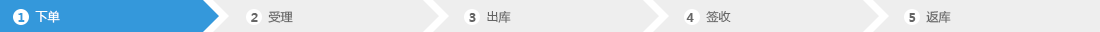
<style>
.page{position:relative;width:1100px;height:32px;background:#eeeeee}
.page>*{position:absolute;margin:0}
.t1{font:12px "MicrosoftYaHei-Bold";color:#3498db}
.t2{font:12px "MicrosoftYaHei";color:#ffffff}
.t3{font:12px "MicrosoftYaHei-Bold";color:#666666}
.t4{font:12px "MicrosoftYaHei";color:#666666}
.t5{font:12px "MicrosoftYaHei-Bold";color:#656565}
.t6{font:12px "MicrosoftYaHei";color:#656565}
</style>
<div class="page">
<p class="t1" style="left:18px;top:13px;width:7px;height:9px">1</p>
<p class="t2" style="left:35px;top:10px;width:25px;height:13px">下单</p>
<p class="t3" style="left:251px;top:13px;width:7px;height:9px">２</p>
<p class="t4" style="left:268px;top:11px;width:25px;height:12px">受理</p>
<p class="t5" style="left:469px;top:13px;width:7px;height:9px">３</p>
<p class="t6" style="left:487px;top:11px;width:24px;height:12px">出库</p>
<p class="t5" style="left:686px;top:13px;width:8px;height:9px">4</p>
<p class="t6" style="left:706px;top:11px;width:25px;height:12px">签收</p>
<p class="t5" style="left:909px;top:13px;width:7px;height:9px">5</p>
<p class="t6" style="left:926px;top:11px;width:25px;height:12px">返库</p>
</div>
